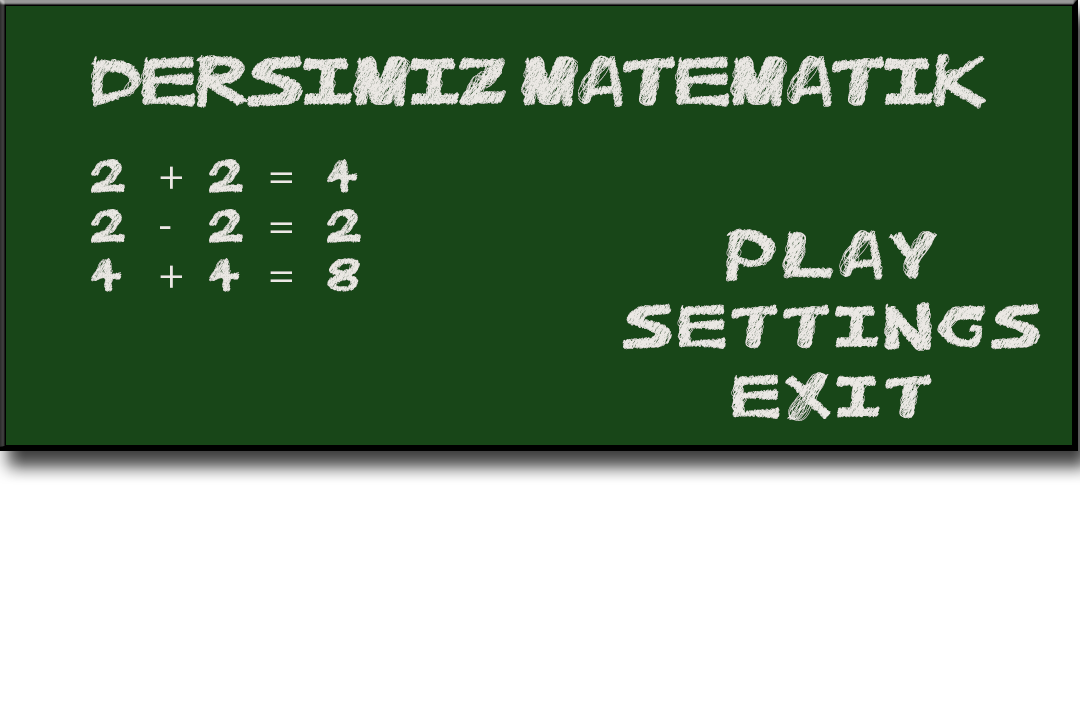
<style>
.page{position:relative;width:1080px;height:720px;background:#184618}
.page>*{position:absolute;margin:0}
.t1{font:62.1px "CatMeow";color:#ebe8e4}
.t2{font:41.4px "CatMeow";color:#ebe8e4}
.t3{font:41.4px "MyriadPro-Regular";color:#ebe8e4}
.t4{font:60px "CatMeow";letter-spacing:0.1em;color:#ebe8e4}
.t5{font:55px "CatMeow";letter-spacing:0.1em;color:#ebe8e4}
</style>
<div class="page">
<p class="t1" style="left:91px;top:53px;width:895px;height:56px">DerSimiz Matematik</p>
<p class="t2" style="left:91px;top:159px;width:34px;height:133px">2<br>2<br>4</p>
<p class="t2" style="left:209px;top:159px;width:34px;height:133px">2<br>2<br>4</p>
<p class="t2" style="left:327px;top:159px;width:34px;height:133px">4<br>2<br>8</p>
<p class="t3" style="left:160px;top:166px;width:132px;height:122px">+     =<br>-     =<br>+     =</p>
<p class="t4" style="left:726px;top:228px;width:211px;height:54px">Play</p>
<p class="t5" style="left:622px;top:302px;width:419px;height:49px">Settings</p>
<p class="t5" style="left:731px;top:372px;width:201px;height:49px">Exit</p>
</div>
